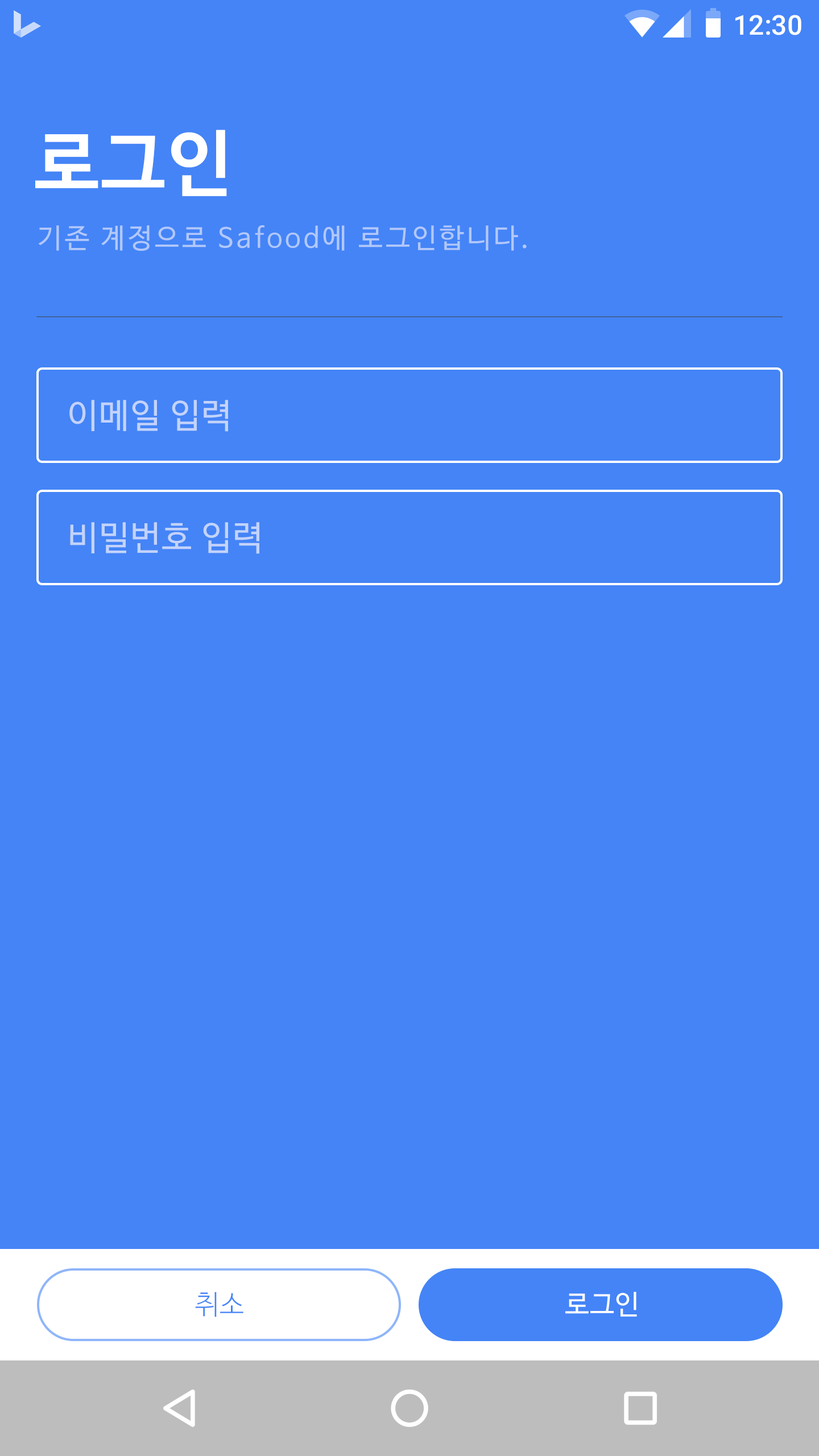
<style>
.page{position:relative;width:819px;height:1456px;background:#4484f6}
.page>*{position:absolute;margin:0}
.t1{font:27.3px "Roboto-Medium";color:#ffffff}
.t2{font:72.8px "NanumBarunGothicBold";letter-spacing:0.025em;color:#ffffff}
.t3{font:27.3px "NanumBarunGothic";letter-spacing:0.1em;color:#b2c8fb}
.t4{font:34.1px "NanumBarunGothic";letter-spacing:0.025em;color:#c3d3fb}
.t5{font:27.3px "NanumBarunGothicLight";letter-spacing:0.025em;color:#4484f6}
.t6{font:27.3px "NanumBarunGothic";letter-spacing:0.025em;color:#ffffff}
</style>
<div class="page">
<p class="t1" style="left:735px;top:15px;width:66px;height:20px">12:30</p>
<p class="t2" style="left:35px;top:130px;width:192px;height:66px">로그인</p>
<p class="t3" style="left:38px;top:225px;width:489px;height:26px">기존 계정으로 Safood에 로그인합니다.</p>
<p class="t4" style="left:69px;top:400px;width:159px;height:32px">이메일 입력</p>
<p class="t4" style="left:70px;top:522px;width:189px;height:32px">비밀번호 입력</p>
<p class="t5" style="left:195px;top:1292px;width:48px;height:25px">취소</p>
<p class="t6" style="left:565px;top:1292px;width:72px;height:25px">로그인</p>
</div>
